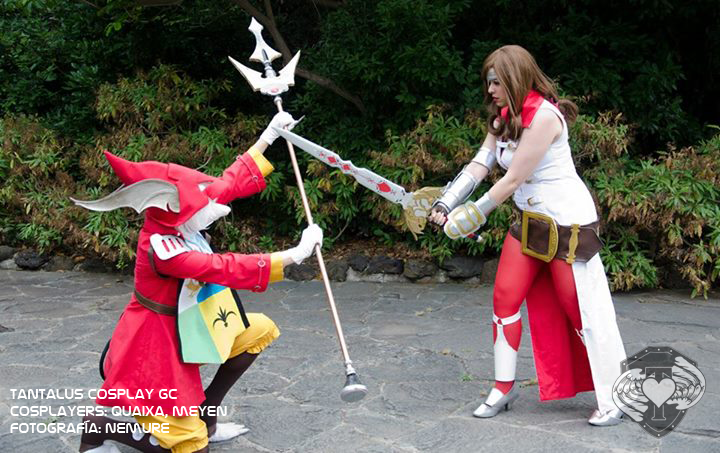
<style>
.page{position:relative;width:720px;height:453px}
.page>*{position:absolute;margin:0}
.t1{font:14px "NasalizationRg-Regular";color:#ffffff}
</style>
<div class="page">
<p class="t1" style="left:10px;top:389px;width:217px;height:44px">tantalus cosplay gc<br>cosplayers: quaixa, meyen<br>fotografía: nemure</p>
</div>
